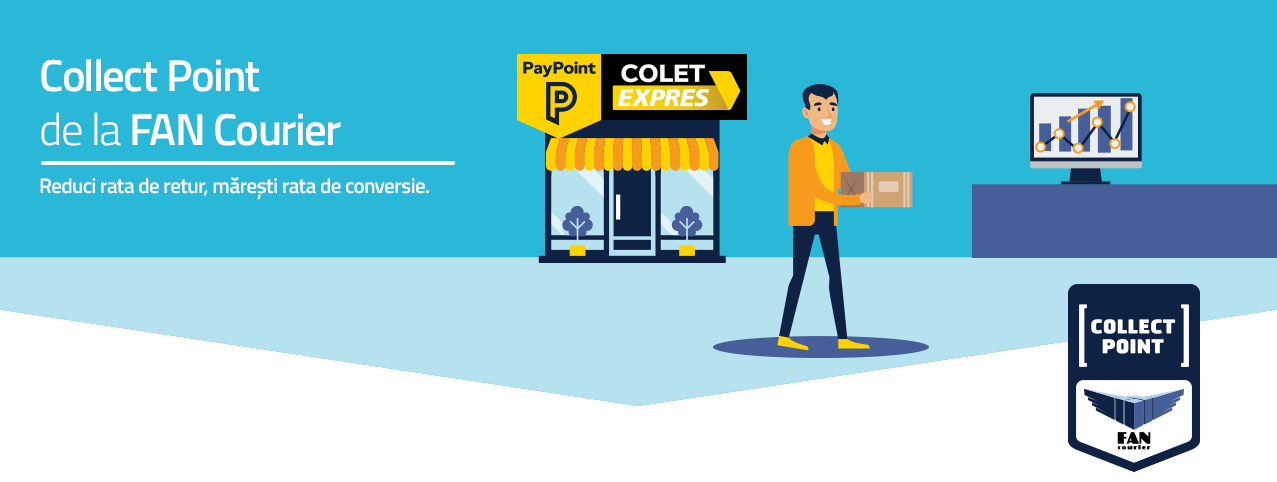
<style>
.page{position:relative;width:1277px;height:482px;background:#29b8d7}
.page>*{position:absolute;margin:0}
.t1{font:21px/48px "TitilliumWeb-SemiBold";letter-spacing:-0.025em;color:#ffffff}
.t2{font:44.8px "TitilliumWeb-SemiBold";letter-spacing:-0.025em;color:#ffffff}
.t3{font:44.8px "TitilliumWeb-Light";letter-spacing:-0.025em;color:#ffffff}
</style>
<div class="page">
<p class="t1" style="left:40px;top:59px;width:389px;height:141px"><span class="t2">Collect Point</span><span class="t3"> <br>de la </span><span class="t2">FAN Courier<br></span>Reduci rata de retur, mărești rata de conversie.</p>
</div>
